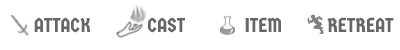
<style>
.page{position:relative;width:400px;height:50px;background:#ffffff}
.page>*{position:absolute;margin:0}
.t1{font:20px "GermaniaOne-Regular";color:#666666}
</style>
<div class="page">
<p class="t1" style="left:34px;top:17px;width:56px;height:16px">ATTACK</p>
<p class="t1" style="left:148px;top:17px;width:37px;height:16px">CAST</p>
<p class="t1" style="left:245px;top:17px;width:36px;height:15px">ITEM</p>
<p class="t1" style="left:327px;top:17px;width:67px;height:15px">RETREAT</p>
</div>
